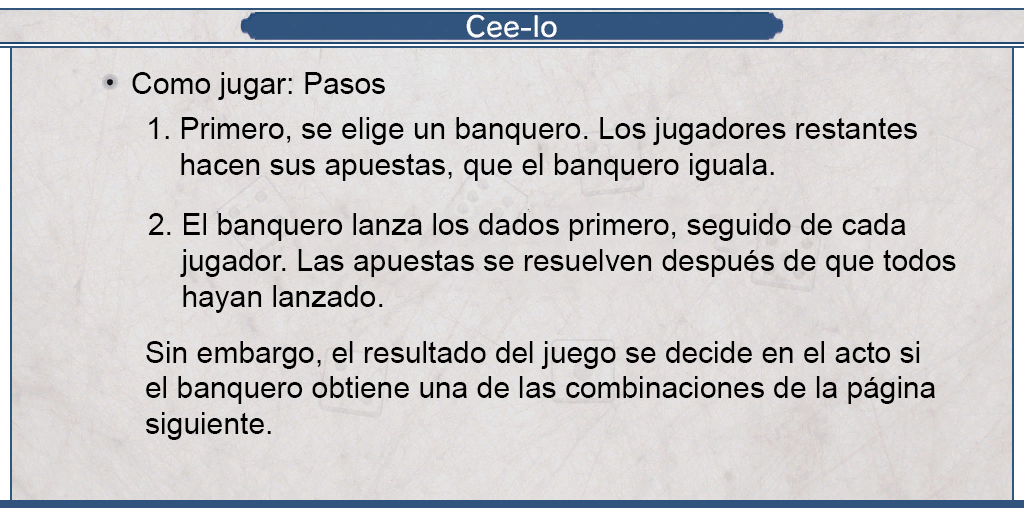
<style>
.page{position:relative;width:1024px;height:512px}
.page>*{position:absolute;margin:0}
.t1{font:29.8px "ArialMT";color:#000000}
.t2{font:30px "ArialMT";color:#000000}
.t3{font:29.9px "ArialMT";color:#000000}
</style>
<div class="page">
<p class="t1" style="left:132px;top:72px;width:253px;height:28px">Como jugar: Pasos</p>
<p class="t2" style="left:149px;top:117px;width:768px;height:64px;text-align:justify">1. Primero, se elige un banquero. Los jugadores restantes<br>    hacen sus apuestas, que el banquero iguala.</p>
<p class="t3" style="left:148px;top:213px;width:808px;height:100px;text-align:justify">2. El banquero lanza los dados primero, seguido de cada<br>    jugador. Las apuestas se resuelven después de que todos<br>    hayan lanzado.</p>
<p class="t3" style="left:146px;top:341px;width:789px;height:99px;text-align:justify">Sin embargo, el resultado del juego se decide en el acto si<br>el banquero obtiene una de las combinaciones de la página<br>siguiente.</p>
</div>
